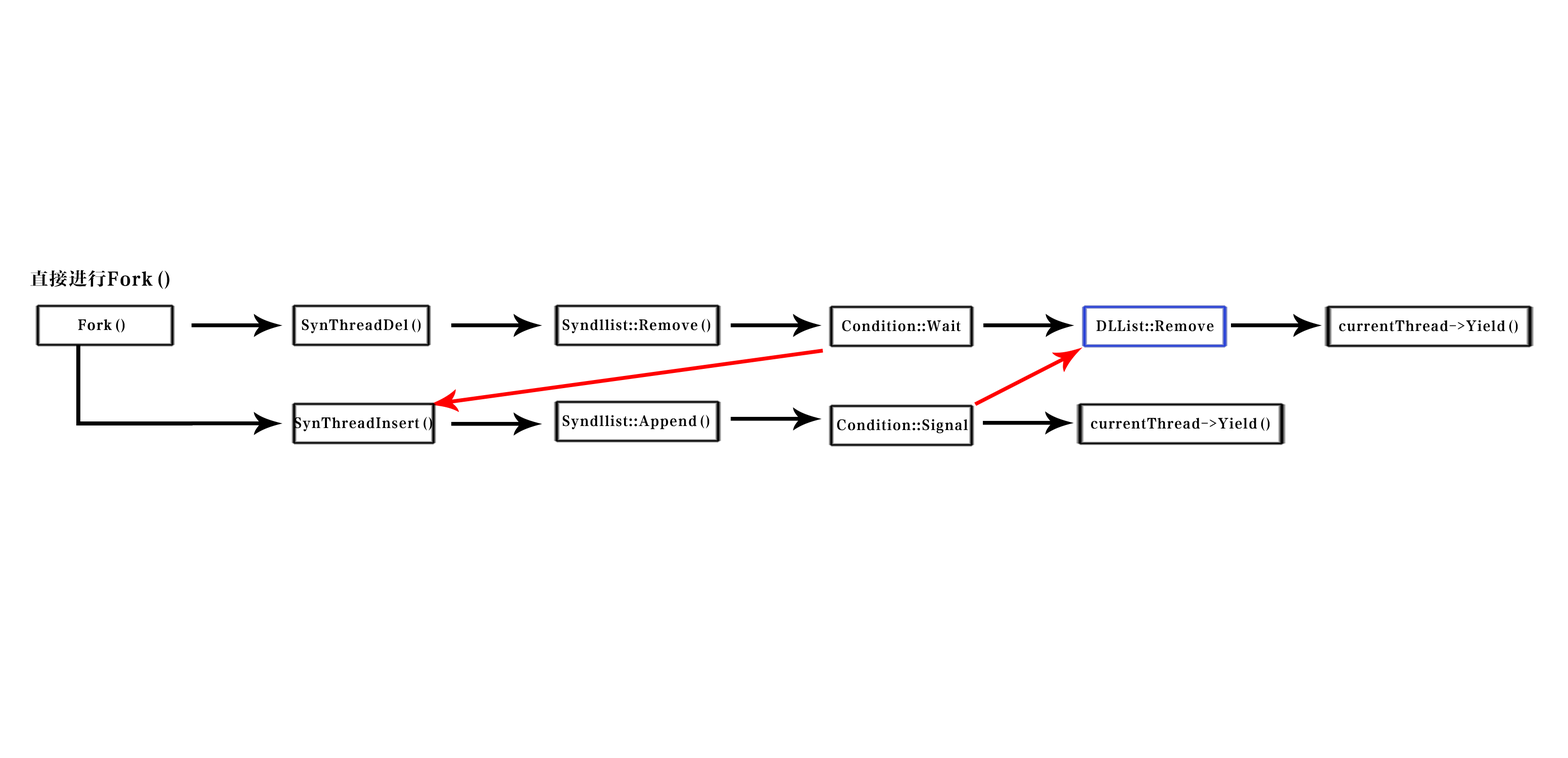
<style>
.page{position:relative;width:1568px;height:758px;background:#ffffff}
.page>*{position:absolute;margin:0}
.t1{font:18.3px "FZCYSK--GBK1-0";letter-spacing:0.06em;color:#000000}
.t2{font:13.7px "FZCYSK--GBK1-0";letter-spacing:0.06em;color:#000000}
</style>
<div class="page">
<p class="t1" style="left:30px;top:270px;width:140px;height:19px">直接进行Fork()</p>
<p class="t2" style="left:78px;top:318px;width:47px;height:14px">Fork()</p>
<p class="t2" style="left:302px;top:318px;width:119px;height:16px">SynThreadDel()</p>
<p class="t2" style="left:562px;top:318px;width:148px;height:16px">Syndllist::Remove()</p>
<p class="t2" style="left:842px;top:320px;width:119px;height:11px">Condition::Wait</p>
<p class="t2" style="left:1096px;top:320px;width:118px;height:11px">DLList::Remove</p>
<p class="t2" style="left:1339px;top:319px;width:179px;height:15px">currentThread-&gt;Yield()</p>
<p class="t2" style="left:294px;top:416px;width:138px;height:16px">SynThreadInsert()</p>
<p class="t2" style="left:562px;top:414px;width:147px;height:16px">Syndllist::Append()</p>
<p class="t2" style="left:837px;top:419px;width:131px;height:15px">Condition::Signal</p>
<p class="t2" style="left:1091px;top:417px;width:179px;height:14px">currentThread-&gt;Yield()</p>
</div>
